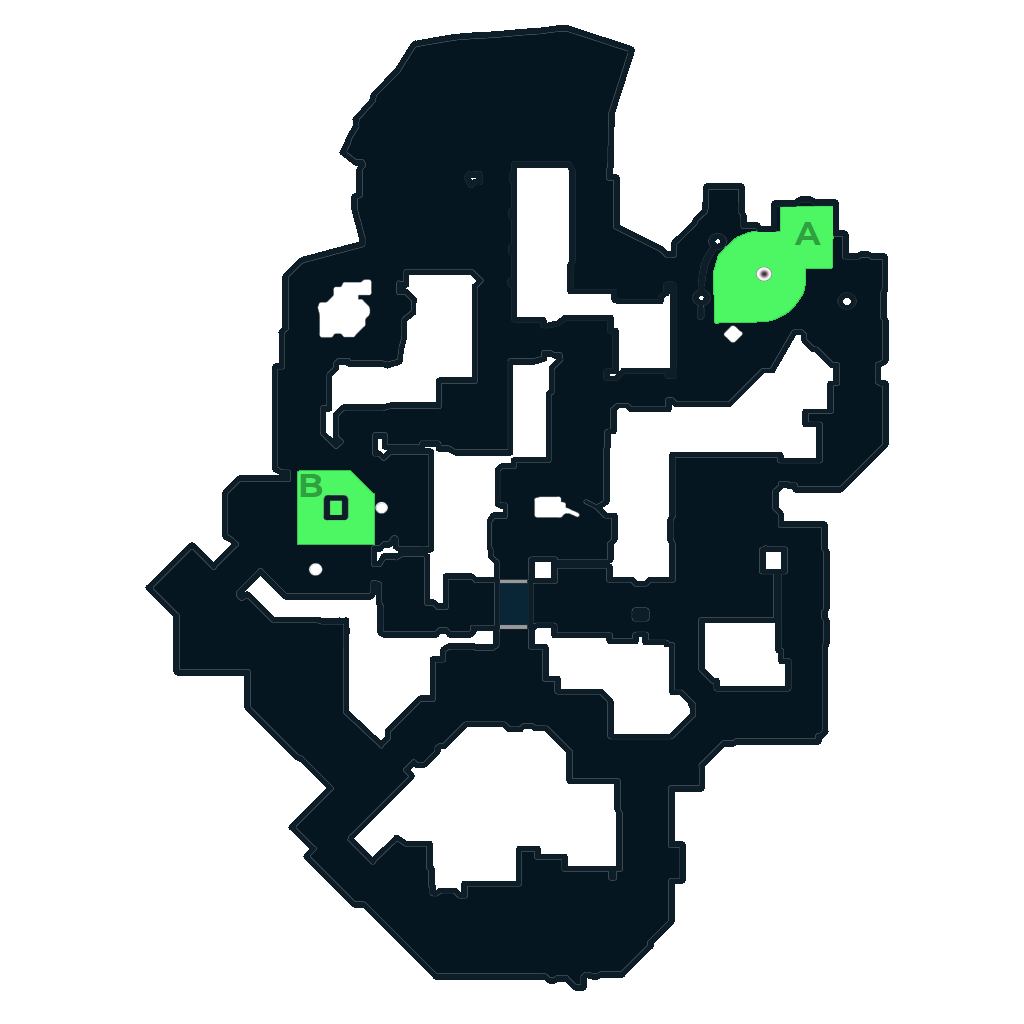
<style>
.page{position:relative;width:1024px;height:1024px;background:#ffffff}
.page>*{position:absolute;margin:0}
.t1{font:33.3px "Montserrat-Bold";color:#31a040}
</style>
<div class="page">
<p class="t1" style="left:794px;top:222px;width:27px;height:23px">A</p>
<p class="t1" style="left:300px;top:474px;width:23px;height:23px">B</p>
</div>
